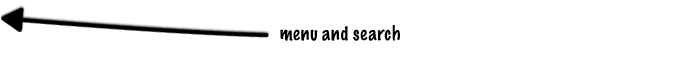
<style>
.page{position:relative;width:680px;height:63px;background:#ffffff}
.page>*{position:absolute;margin:0}
.t1{font:18px "MarkerFelt-Thin";color:#000000}
</style>
<div class="page">
<p class="t1" style="left:280px;top:25px;width:120px;height:16px">menu and search</p>
</div>
